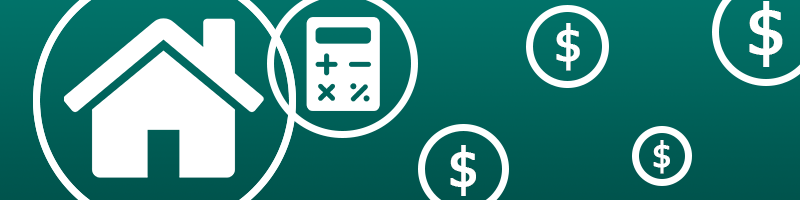
<style>
.page{position:relative;width:800px;height:200px;background:#ffffff}
.page>*{position:absolute;margin:0}
.t1{font:68.6px "KhmerNettra";letter-spacing:0.08em;color:#ffffff;font-weight:bold}
.t2{font:49.3px "KhmerNettra";letter-spacing:0.08em;color:#ffffff;font-weight:bold}
.t3{font:53px "KhmerNettra";letter-spacing:0.08em;color:#ffffff;font-weight:bold}
.t4{font:33.8px "KhmerNettra";letter-spacing:0.08em;color:#ffffff;font-weight:bold}
</style>
<div class="page">
<p class="t1" style="left:749px;top:1px;width:34px;height:66px">$</p>
<p class="t2" style="left:556px;top:23px;width:24px;height:48px">$</p>
<p class="t3" style="left:450px;top:145px;width:26px;height:51px">$</p>
<p class="t4" style="left:653px;top:140px;width:17px;height:34px">$</p>
</div>
